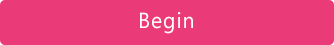
<style>
.page{position:relative;width:334px;height:45px;background:#ea3a77}
.page>*{position:absolute;margin:0}
.t1{font:21.9px "SegoeUI";letter-spacing:0.05em;color:#fffefe;scale:0.96 1}
</style>
<div class="page">
<p class="t1" style="left:140px;top:12px;width:53px;height:22px">Begin</p>
</div>
